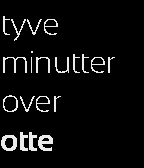
<style>
.page{position:relative;width:144px;height:168px;background:#000000}
.page>*{position:absolute;margin:0}
.t1{font:32px "Sansation-Light";letter-spacing:-0.025em;color:#ebebeb}
.t2{font:32px "Sansation-Bold";letter-spacing:-0.025em;color:#ebebeb}
</style>
<div class="page">
<p class="t1" style="left:3px;top:16px;width:112px;height:96px">tyve<br>minutter<br>over</p>
<p class="t2" style="left:1px;top:132px;width:52px;height:19px">otte</p>
</div>
